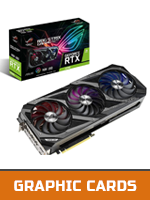
<style>
.page{position:relative;width:150px;height:200px;background:#ffffff}
.page>*{position:absolute;margin:0}
.t1{font:15.1px "RussoOne";letter-spacing:0.05em;color:#ffffff;scale:0.91 1}
</style>
<div class="page">
<p class="t1" style="left:14px;top:180px;width:123px;height:11px">GRAPHIC CARDS</p>
</div>
